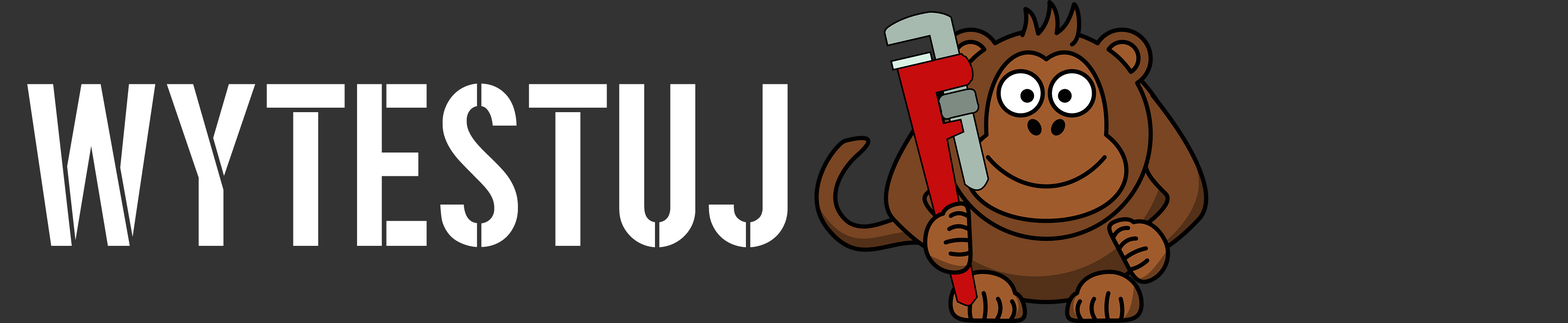
<style>
.page{position:relative;width:1568px;height:323px;background:#333333}
.page>*{position:absolute;margin:0}
.t1{font:224px "OmbudsmanStencil";letter-spacing:0.01em;color:#ffffff}
</style>
<div class="page">
<p class="t1" style="left:27px;top:83px;width:761px;height:164px">wytestuj</p>
</div>
